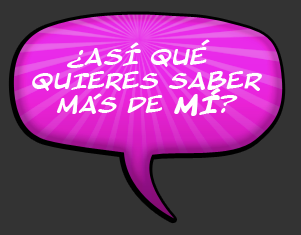
<style>
.page{position:relative;width:301px;height:235px;background:#333333}
.page>*{position:absolute;margin:0}
.t1{font:16.7px "BlambotProItalic";color:#ffffff;scale:1.11 1}
.t2{font:19.8px/24px "BlambotProItalic";color:#ffffff;scale:1.11 1}
.t3{font:19.8px/24px "BlambotProBold";color:#ffffff;scale:1.11 1}
.t4{font:19.8px "BlambotProItalic";color:#ffffff;scale:1.11 1}
.t5{font:16.7px "BlambotProBold";color:#ffffff;scale:1.11 1}
</style>
<div class="page">
<p class="t1" style="left:201px;top:39px;width:9px;height:7px;rotate:59deg">‘</p>
<p class="t2" style="left:32px;top:47px;width:230px;height:69px;text-align:center">ASI QUE QUIERES SABER MAS DE <span class="t3">MI</span>?</p>
<p class="t4" style="left:67px;top:50px;width:17px;height:18px;rotate:180deg">?</p>
<p class="t1" style="left:130px;top:42px;width:9px;height:7px;rotate:59deg">‘</p>
<p class="t5" style="left:211px;top:88px;width:10px;height:8px;rotate:59deg">‘</p>
<p class="t1" style="left:93px;top:93px;width:9px;height:7px;rotate:59deg">‘</p>
</div>
